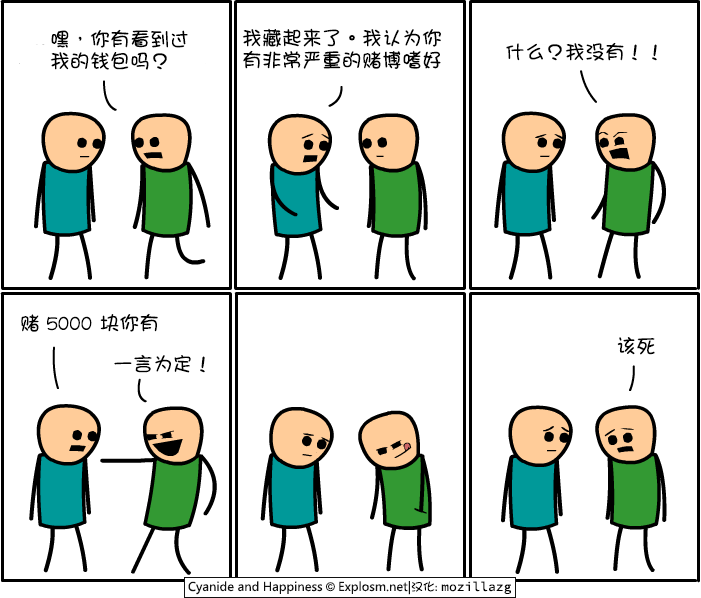
<style>
.page{position:relative;width:701px;height:598px;background:#ffffff}
.page>*{position:absolute;margin:0}
.t1{font:20px/22px "DFGirl";color:#000000}
.t2{font:20px "DFGirl";color:#000000}
</style>
<div class="page">
<p class="t1" style="left:50px;top:29px;width:138px;height:41px">嘿，你有看到过<br>我的钱包吗？</p>
<p class="t1" style="left:242px;top:28px;width:199px;height:41px">我藏起来了。我认为你<br>有非常严重的赌博嗜好</p>
<p class="t2" style="left:506px;top:42px;width:151px;height:19px">什么？我没有！！</p>
<p class="t2" style="left:21px;top:313px;width:137px;height:19px">赌 5000 块你有</p>
<p class="t2" style="left:617px;top:337px;width:38px;height:18px">该死</p>
<p class="t2" style="left:114px;top:354px;width:91px;height:19px">一言为定！</p>
</div>
